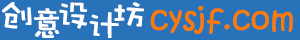
<style>
.page{position:relative;width:300px;height:40px;background:#2772b8}
.page>*{position:absolute;margin:0}
.t1{font:36px "DFPWaWaW5";color:#ffffff;font-weight:bold}
.t2{font:30px "KristenITC-Regular";color:#ff7a01;font-weight:bold}
</style>
<div class="page">
<p class="t1" style="left:2px;top:2px;width:30px;height:27px">创</p>
<p class="t1" style="left:59px;top:2px;width:28px;height:27px">设</p>
<p class="t1" style="left:114px;top:2px;width:30px;height:25px">坊</p>
<p class="t2" style="left:150px;top:5px;width:143px;height:29px">cysjf.com</p>
<p class="t1" style="left:34px;top:8px;width:26px;height:30px">意</p>
<p class="t1" style="left:89px;top:12px;width:30px;height:26px">计</p>
</div>
